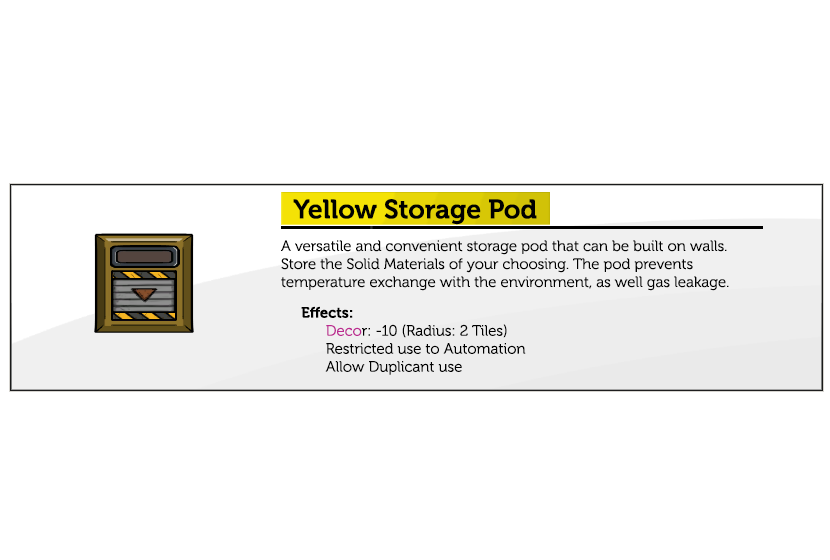
<style>
.page{position:relative;width:830px;height:560px;background:#ffffff}
.page>*{position:absolute;margin:0}
.t1{font:26.7px "Museo-700";color:#000000}
.t2{font:15px "Museo-300";color:#000000}
.t3{font:15px "Museo-700";color:#000000}
.t4{font:15px "Museo-300";color:#bc2991}
</style>
<div class="page">
<p class="t1" style="left:293px;top:199px;width:244px;height:26px">Yellow Storage Pod</p>
<p class="t2" style="left:281px;top:240px;width:448px;height:51px">A versatile and convenient storage pod that can be built on walls. Store the Solid Materials of your choosing. The pod prevents temperature exchange with the environment, as well gas leakage.</p>
<p class="t2" style="left:301px;top:306px;width:225px;height:69px"><span class="t3">Effects:<br>      </span><span class="t4">Deco</span>r: -10 (Radius: 2 Tiles)<br>      Restricted use to Automation<br>      Allow Duplicant use</p>
</div>
